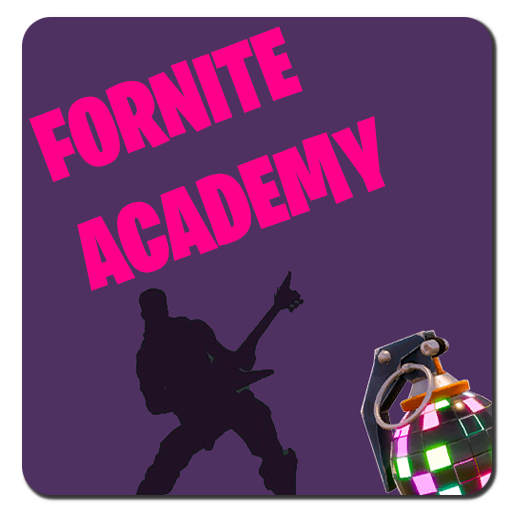
<style>
.page{position:relative;width:512px;height:512px;background:#4f3161}
.page>*{position:absolute;margin:0}
.t1{font:97px "BurbankBigCondensed-Black";color:#ff008a}
</style>
<div class="page">
<p class="t1" style="left:29px;top:26px;width:357px;height:265px;rotate:-20deg">FORNITE <br>ACADEMY</p>
</div>
